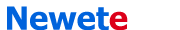
<style>
.page{position:relative;width:180px;height:30px;background:#ffffff}
.page>*{position:absolute;margin:0}
.t1{font:32.1px "Tahoma-Bold";color:#0063dc}
.t2{font:32.1px "Tahoma-Bold";color:#dc001a}
</style>
<div class="page">
<p class="t1" style="left:7px;top:6px;width:121px;height:25px">Newet<span class="t2">e</span></p>
</div>
